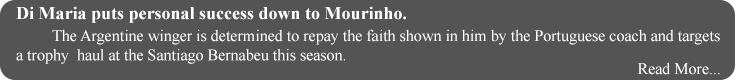
<style>
.page{position:relative;width:735px;height:80px;background:#545454}
.page>*{position:absolute;margin:0}
.t1{font:18px "TimesNewRomanPS-BoldMT";color:#ffffff}
.t2{font:16px "TimesNewRomanPSMT";color:#ffffff}
</style>
<div class="page">
<p class="t1" style="left:16px;top:6px;width:390px;height:17px">Di Maria puts personal success down to Mourinho.</p>
<p class="t2" style="left:16px;top:29px;width:704px;height:35px">The Argentine winger is determined to repay the faith shown in him by the Portuguese coach and targets <br>a trophy  haul at the Santiago Bernabeu this season.</p>
<p class="t2" style="left:637px;top:62px;width:83px;height:13px">Read More...</p>
</div>
